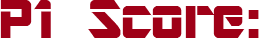
<style>
.page{position:relative;width:259px;height:38px;background:#ffffff}
.page>*{position:absolute;margin:0}
.t1{font:60px "ARDESTINE";color:#9f0017}
</style>
<div class="page">
<p class="t1" style="left:0px;top:0px;width:259px;height:38px">P1 Score:</p>
</div>
